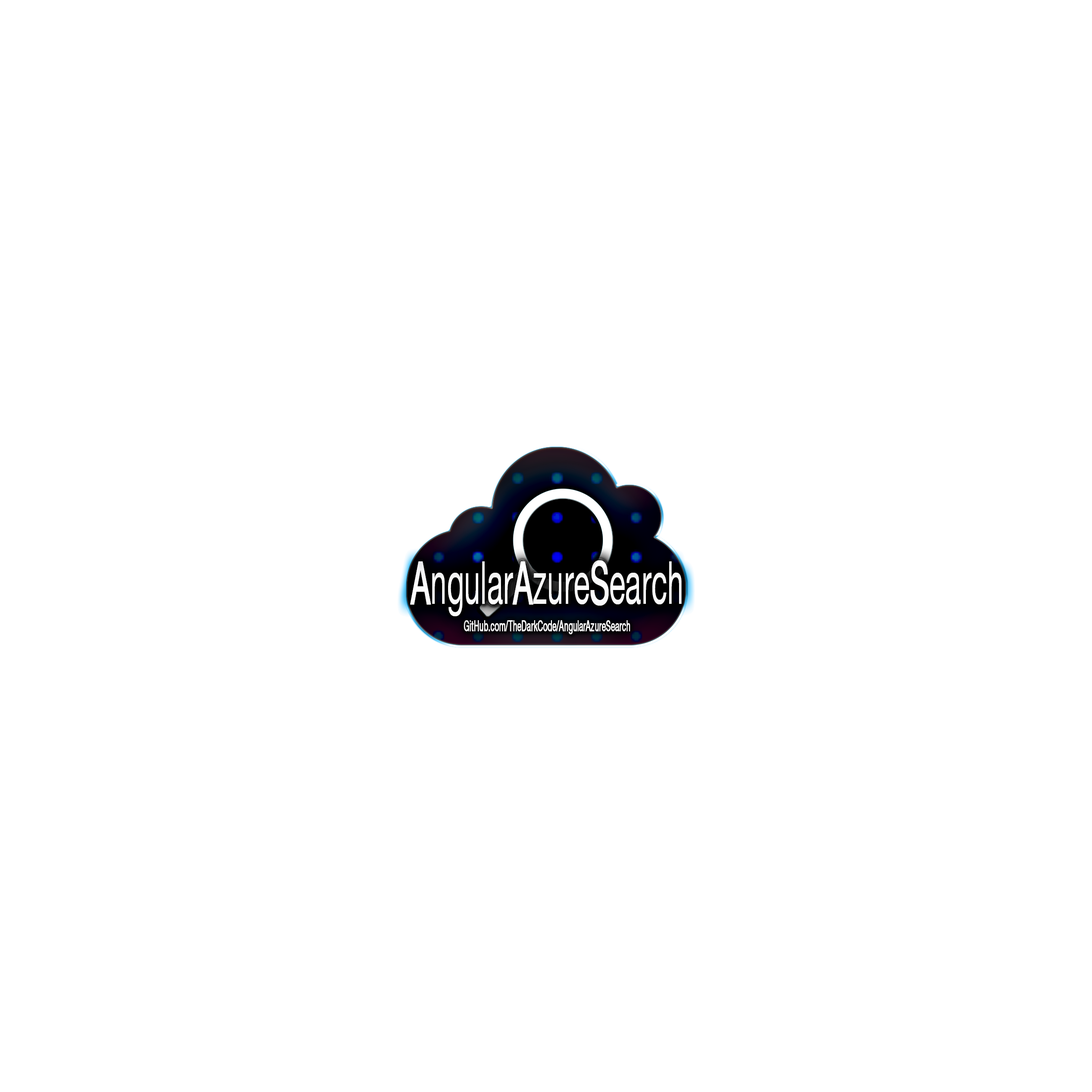
<style>
.page{position:relative;width:1092px;height:1092px;background:#ffffff}
.page>*{position:absolute;margin:0}
.t1{font:59.3px "HelveticaNeueLTPro-Roman";color:#fcfcfc;scale:0.5 1}
.t2{font:59.3px "HelveticaNeueLTPro-Roman";color:#fcfcfc;font-weight:bold;scale:0.5 1}
.t3{font:14.8px "HelveticaNeueLTPro-Roman";color:#fefefe;font-weight:bold;scale:0.5 1}
</style>
<div class="page">
<p class="t1" style="left:410px;top:560px;width:272px;height:57px"><span class="t2">A</span>ngular<span class="t2">A</span>zure<span class="t2">S</span>earch</p>
<p class="t3" style="left:464px;top:620px;width:166px;height:15px">GitHub.com/TheDarkCode/AngularAzureSearch</p>
</div>
